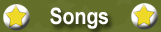
<style>
.page{position:relative;width:161px;height:32px;background:#636e29}
.page>*{position:absolute;margin:0}
.t1{font:22.8px "Arial-BoldMT";color:#ffffff;scale:0.86 1}
</style>
<div class="page">
<p class="t1" style="left:50px;top:7px;width:58px;height:22px">Songs</p>
</div>
